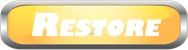
<style>
.page{position:relative;width:188px;height:50px}
.page>*{position:absolute;margin:0}
.t1{font:22px "GillSans-UltraBold";color:#ffffff;font-style:italic}
.t2{font:31.4px "GillSans-UltraBold";color:#ffffff;font-style:italic}
</style>
<div class="page">
<p class="t1" style="left:31px;top:12px;width:131px;height:25px"><span class="t2">R</span>ESTORE</p>
</div>
